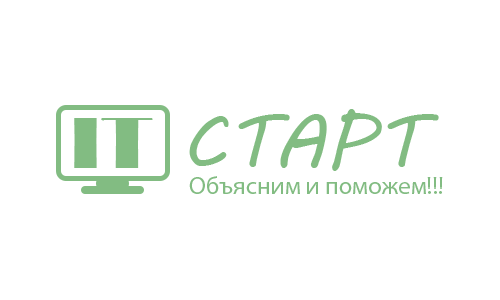
<style>
.page{position:relative;width:500px;height:300px;background:#ffffff}
.page>*{position:absolute;margin:0}
.t1{font:75px "MVBoli";color:#82bc82}
.t2{font:75px "Broadway";color:#82bc82}
.t3{font:25px "MyriadPro-Regular";color:#82bc82}
</style>
<div class="page">
<p class="t1" style="left:189px;top:109px;width:250px;height:62px">CTAPT</p>
<p class="t2" style="left:74px;top:118px;width:79px;height:50px">IT</p>
<p class="t3" style="left:189px;top:176px;width:254px;height:18px">Объясним и поможем!!!</p>
</div>
